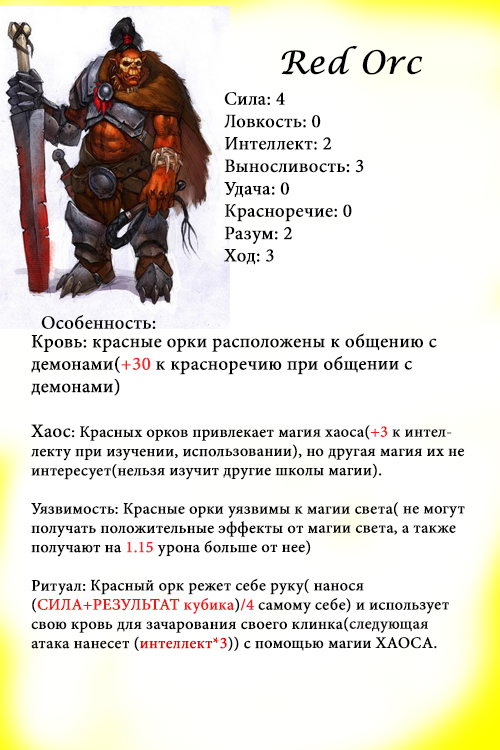
<style>
.page{position:relative;width:500px;height:750px;background:#ffffff}
.page>*{position:absolute;margin:0}
.t1{font:32px "LucidaCalligraphy-Italic";color:#000000;font-weight:bold}
.t2{font:18.7px "MinionPro-Regular";color:#000000;font-weight:bold}
.t3{font:16px "MinionPro-Regular";color:#000000;font-weight:bold}
.t4{font:18.7px "MinionPro-Regular";color:#f42a2a;font-weight:bold}
.t5{font:16px "MinionPro-Regular";color:#f91717;font-weight:bold}
.t6{font:16px "MinionPro-Regular";color:#ec2424;font-weight:bold}
.t7{font:16px "MinionPro-Regular";color:#f81212;font-weight:bold}
.t8{font:16px "MinionPro-Regular";color:#e92626;font-weight:bold}
.t9{font:16px "MinionPro-Regular";color:#140e0e;font-weight:bold}
.t10{font:16px "MinionPro-Regular";color:#e80000;font-weight:bold}
</style>
<div class="page">
<p class="t1" style="left:281px;top:46px;width:142px;height:29px">Red Orc</p>
<p class="t2" style="left:224px;top:92px;width:140px;height:173px">Сила: 4<br>Ловкость: 0<br>Интеллект: 2<br>Выносливость: 3<br>Удача: 0<br>Красноречие: 0<br>Разум: 2<br>Ход: 3</p>
<p class="t2" style="left:41px;top:315px;width:115px;height:14px">Особенность:</p>
<p class="t3" style="left:31px;top:333px;width:434px;height:318px"><span class="t2">Кровь: красные орки расположены к общению с демонами(</span><span class="t4">+30</span><span class="t2"> к красноречию при общении с <br>демонами)<br><br>Хаос</span>: Красных орков привлекает магия хаоса(<span class="t5">+3</span> к интеллекту при изучении, использовании), но другая магия их не интересует(нельзя изучит другие школы магии).<br><br>Уязвимость: Красные орки уязвимы к магии света( не могут получать положительные эффекты от магии света, а также получают на <span class="t6">1.15</span> урона больше от нее)<br><br>Ритуал: Красный орк режет себе руку( нанося <br>(<span class="t7">СИЛА+РЕЗУЛЬТАТ кубика</span>)<span class="t8">/4</span> самому себе) и использует свою кровь для зачарования своего клинка(<span class="t9">следующая атака нанесет </span>(<span class="t10">интеллект*3</span>)) с помощью магии ХАОСА.</p>
</div>
